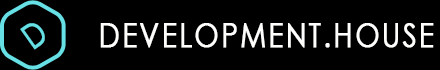
<style>
.page{position:relative;width:440px;height:70px;background:#000000}
.page>*{position:absolute;margin:0}
.t1{font:33.6px "CenturyGothic";letter-spacing:0.06em;color:#66e0e5;text-transform:uppercase;font-weight:bold;scale:0.83 1}
.t2{font:33.6px "CenturyGothic";letter-spacing:0.06em;color:#fffffe;text-transform:uppercase;font-weight:bold;scale:0.83 1}
</style>
<div class="page">
<p class="t1" style="left:20px;top:23px;width:25px;height:27px;rotate:-35deg">D</p>
<p class="t2" style="left:100px;top:23px;width:334px;height:25px">Development.House</p>
</div>
